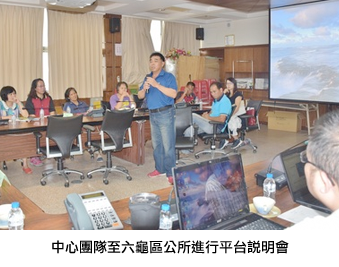
<style>
.page{position:relative;width:339px;height:267px}
.page>*{position:absolute;margin:0}
.t1{font:14px "LiHeiPro";color:#000000}
</style>
<div class="page">
<p class="t1" style="left:52px;top:240px;width:237px;height:14px">中心團隊至六龜區公所進行平台說明會</p>
</div>
